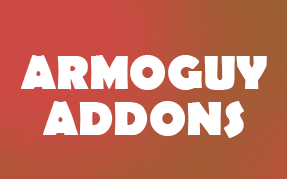
<style>
.page{position:relative;width:287px;height:179px}
.page>*{position:absolute;margin:0}
.t1{font:48px "BerlinSansFB-Bold";color:#ffffff}
</style>
<div class="page">
<p class="t1" style="left:21px;top:55px;width:246px;height:35px">ARMOGUY</p>
<p class="t1" style="left:43px;top:101px;width:201px;height:37px">ADDONS</p>
</div>
